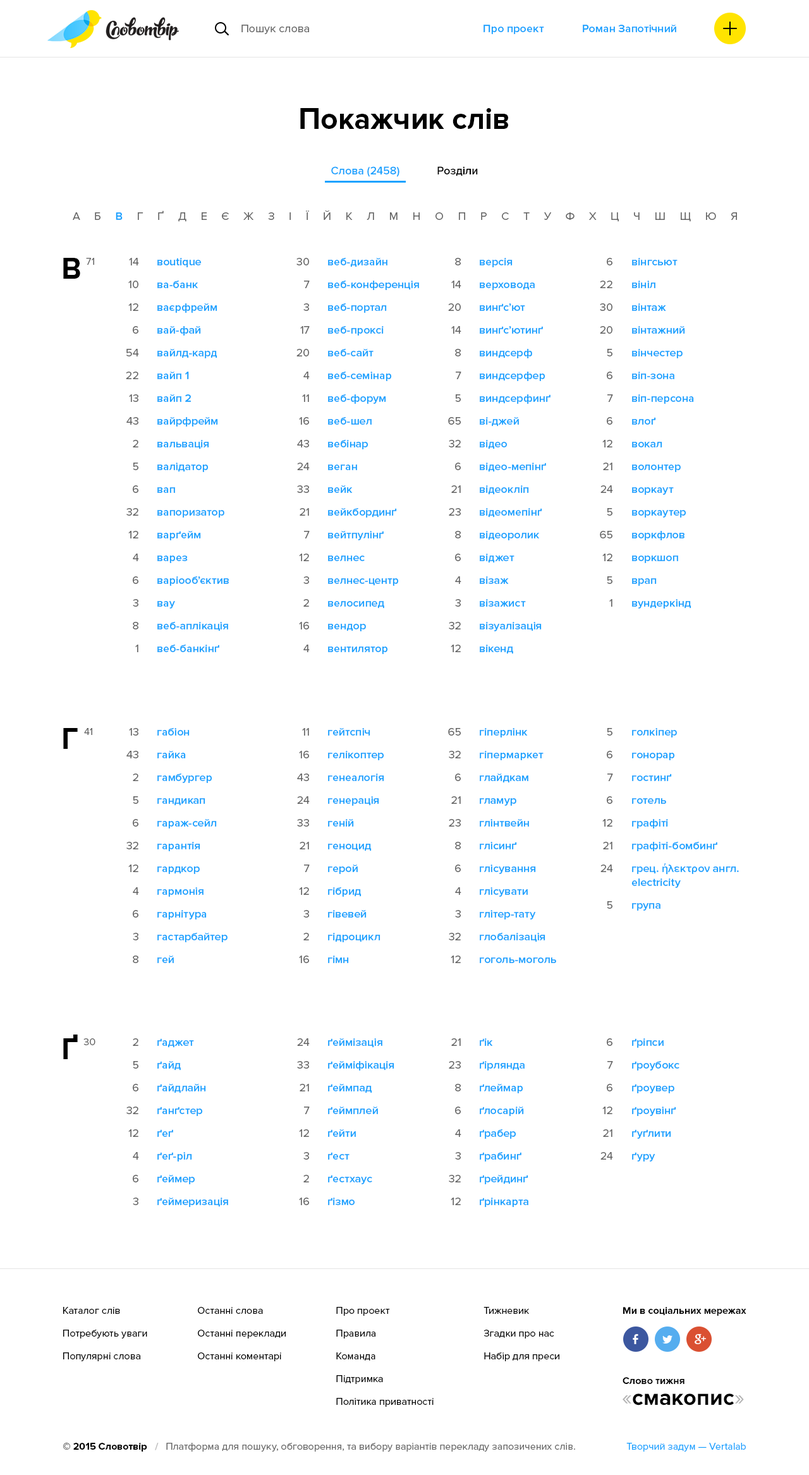
<style>
.page{position:relative;width:809px;height:1475px;background:#ffffff}
.page>*{position:absolute;margin:0}
.t1{font:11.4px "ProximaNova-Regular";color:#666666}
.t2{font:11.4px "ProximaNova-Semibold";color:#17a2ff}
.t3{font:30.3px "ProximaNova-Bold";color:#000000}
.t4{font:11.4px "ProximaNova-Semibold";color:#000000}
.t5{font:11.4px "ProximaNova-Regular";letter-spacing:0.5em;color:#666666}
.t6{font:11.4px "ProximaNova-Semibold";letter-spacing:0.5em;color:#17a2ff}
.t7{font:10.1px "ProximaNova-Regular";color:#666666}
.t8{font:11.4px/22.7px "ProximaNova-Regular";color:#666666}
.t9{font:11.4px/22.7px "ProximaNova-Semibold";color:#17a2ff}
.t10{font:11.4px/13.9px "ProximaNova-Regular";color:#666666}
.t11{font:10.1px/22.7px "ProximaNova-Regular";color:#000000}
.t12{font:10.1px/22.7px "ProximaNova-Regular";color:#010101}
.t13{font:10.1px "ProximaNova-Bold";color:#010101}
.t14{font:22.7px "ProximaNova-Bold";color:#000000}
.t15{font:22.7px "ProximaNova-Regular";color:#b3b3b3}
.t16{font:10.1px "ProximaNova-Bold";color:#000000}
.t17{font:10.1px "ProximaNova-Bold";color:#bfbfbf}
.t18{font:10.1px "ProximaNova-Regular";color:#17a2ff}
</style>
<div class="page">
<p class="t1" style="left:241px;top:25px;width:68px;height:9px">Пошук слова</p>
<p class="t2" style="left:483px;top:25px;width:61px;height:9px">Про проект</p>
<p class="t2" style="left:582px;top:25px;width:94px;height:7px">Роман Запотічний</p>
<p class="t3" style="left:300px;top:108px;width:208px;height:21px">Покажчик слів</p>
<p class="t2" style="left:331px;top:166px;width:68px;height:11px">Слова (2458)</p>
<p class="t4" style="left:437px;top:166px;width:41px;height:10px">Розділи</p>
<p class="t5" style="left:73px;top:210px;width:664px;height:12px">А Б <span class="t6">В</span> Г Ґ Д Е Є Ж З І Ї Й К Л М Н О П Р С Т У Ф Х Ц Ч Ш Щ Ю Я</p>
<p class="t3" style="left:63px;top:258px;width:17px;height:21px">В</p>
<p class="t7" style="left:86px;top:258px;width:8px;height:7px">71</p>
<p class="t8" style="left:126px;top:258px;width:13px;height:394px;text-align:right">14<br>10<br>12<br>6<br>54<br>22<br>13<br>43<br>2<br>5<br>6<br>32<br>12<br>4<br>6<br>3<br>8<br>1</p>
<p class="t9" style="left:157px;top:258px;width:72px;height:394px">вoutique<br>ва-банк<br>ваєрфрейм<br>вай-фай<br>вайлд-кард<br>вайп 1<br>вайп 2<br>вайрфрейм<br>вальвація<br>валідатор<br>вап<br>вапоризатор<br>варґейм<br>варез<br>варіооб’єктив<br>вау<br>веб-аплікація<br>веб-банкінґ</p>
<p class="t8" style="left:296px;top:258px;width:14px;height:394px;text-align:right">30<br>7<br>3<br>17<br>20<br>4<br>11<br>16<br>43<br>24<br>33<br>21<br>7<br>12<br>3<br>2<br>16<br>4</p>
<p class="t9" style="left:328px;top:258px;width:91px;height:396px">веб-дизайн<br>веб-конференція<br>веб-портал<br>веб-проксі<br>веб-сайт<br>веб-семінар<br>веб-форум<br>веб-шел<br>вебінар<br>веган<br>вейк<br>вейкбординґ<br>вейтпулінґ<br>велнес<br>велнес-центр<br>велосипед<br>вендор<br>вентилятор</p>
<p class="t8" style="left:448px;top:258px;width:13px;height:394px;text-align:right">8<br>14<br>20<br>14<br>8<br>7<br>5<br>65<br>32<br>6<br>21<br>23<br>8<br>6<br>4<br>3<br>32<br>12</p>
<p class="t9" style="left:480px;top:258px;width:70px;height:396px">версія<br>верховода<br>винґс’ют<br>винґс’ютинґ<br>виндсерф<br>виндсерфер<br>виндсерфинґ<br>ві-джей<br>відео<br>відео-мепінґ<br>відеокліп<br>відеомепінґ<br>відеоролик<br>віджет<br>візаж<br>візажист<br>візуалізація<br>вікенд</p>
<p class="t8" style="left:600px;top:258px;width:13px;height:349px;text-align:right">6<br>22<br>30<br>20<br>5<br>6<br>7<br>6<br>12<br>21<br>24<br>5<br>65<br>12<br>5<br>1</p>
<p class="t9" style="left:632px;top:258px;width:62px;height:350px">вінгсьют<br>вініл<br>вінтаж<br>вінтажний<br>вінчестер<br>віп-зона<br>віп-персона<br>влоґ<br>вокал<br>волонтер<br>воркаут<br>воркаутер<br>воркфлов<br>воркшоп<br>врап<br>вундеркінд</p>
<p class="t3" style="left:63px;top:728px;width:15px;height:21px">Г</p>
<p class="t7" style="left:84px;top:728px;width:8px;height:7px">41</p>
<p class="t8" style="left:126px;top:728px;width:13px;height:235px;text-align:right">13<br>43<br>2<br>5<br>6<br>32<br>12<br>4<br>6<br>3<br>8</p>
<p class="t9" style="left:157px;top:728px;width:70px;height:235px">габіон<br>гайка<br>гамбургер<br>гандикап<br>гараж-сейл<br>гарантія<br>гардкор<br>гармонія<br>гарнітура<br>гастарбайтер<br>гей</p>
<p class="t8" style="left:297px;top:728px;width:13px;height:235px;text-align:right">11<br>16<br>43<br>24<br>33<br>21<br>7<br>12<br>3<br>2<br>16</p>
<p class="t9" style="left:328px;top:728px;width:56px;height:235px">гейтспіч<br>гелікоптер<br>генеалогія<br>генерація<br>геній<br>геноцид<br>герой<br>гібрид<br>гівевей<br>гідроцикл<br>гімн</p>
<p class="t8" style="left:448px;top:728px;width:13px;height:235px;text-align:right">65<br>32<br>6<br>21<br>23<br>8<br>6<br>4<br>3<br>32<br>12</p>
<p class="t9" style="left:480px;top:728px;width:76px;height:235px">гіперлінк<br>гіпермаркет<br>глайдкам<br>гламур<br>глінтвейн<br>глісинґ<br>глісування<br>глісувати<br>глітер-тату<br>глобалізація<br>гоголь-моголь</p>
<p class="t8" style="left:600px;top:728px;width:13px;height:180px;text-align:right">5<br>6<br>7<br>6<br>12<br>21<br>24<br><br><span class="t10">5</span></p>
<p class="t9" style="left:631px;top:728px;width:108px;height:182px">голкіпер<br>гонорар<br>гостинґ<br>готель<br>графіті<br>графіті-бомбинґ<br>грец. ήλεκτρον англ.<br><span class="t2">electricity<br></span>група</p>
<p class="t3" style="left:63px;top:1034px;width:15px;height:25px">Ґ</p>
<p class="t7" style="left:83px;top:1038px;width:12px;height:7px">30</p>
<p class="t8" style="left:126px;top:1038px;width:13px;height:167px;text-align:right">2<br>5<br>6<br>32<br>12<br>4<br>6<br>3</p>
<p class="t9" style="left:157px;top:1038px;width:71px;height:169px">ґаджет<br>ґайд<br>ґайдлайн<br>ґанґстер<br>ґеґ<br>ґеґ-ріл<br>ґеймер<br>ґеймеризація</p>
<p class="t8" style="left:297px;top:1038px;width:13px;height:167px;text-align:right">24<br>33<br>21<br>7<br>12<br>3<br>2<br>16</p>
<p class="t9" style="left:328px;top:1038px;width:66px;height:167px">ґеймізація<br>ґейміфікація<br>ґеймпад<br>ґеймплей<br>ґейти<br>ґест<br>ґестхаус<br>ґізмо</p>
<p class="t8" style="left:449px;top:1038px;width:12px;height:167px;text-align:right">21<br>23<br>8<br>6<br>4<br>3<br>32<br>12</p>
<p class="t9" style="left:480px;top:1038px;width:48px;height:169px">ґік<br>ґірлянда<br>ґлеймар<br>ґлосарій<br>ґрабер<br>ґрабинґ<br>ґрейдинґ<br>ґрінкарта</p>
<p class="t8" style="left:600px;top:1038px;width:13px;height:121px;text-align:right">6<br>7<br>6<br>12<br>21<br>24</p>
<p class="t9" style="left:632px;top:1038px;width:47px;height:123px">ґріпси<br>ґроубокс<br>ґроувер<br>ґроувінґ<br>ґуґлити<br>ґуру</p>
<p class="t11" style="left:63px;top:1307px;width:84px;height:54px">Каталог слів<br>Потребують уваги<br>Популярні слова</p>
<p class="t11" style="left:198px;top:1307px;width:88px;height:54px">Останні слова<br>Останні переклади<br>Останні коментарі</p>
<p class="t11" style="left:336px;top:1307px;width:97px;height:99px">Про проект<br>Правила<br>Команда<br>Підтримка<br>Політика приватності</p>
<p class="t12" style="left:483px;top:1307px;width:76px;height:54px">Тижневик<br>Згадки про нас<br>Набір для преси</p>
<p class="t13" style="left:623px;top:1307px;width:123px;height:8px">Ми в соціальних мережах</p>
<p class="t13" style="left:622px;top:1377px;width:62px;height:7px">Слово тижня</p>
<p class="t14" style="left:622px;top:1393px;width:122px;height:12px"><span class="t15">«</span>смакопис<span class="t15">»</span></p>
<p class="t7" style="left:63px;top:1442px;width:512px;height:9px"><span class="t16">© 2015 Словотвір   </span><span class="t17">/   </span>Платформа для пошуку, обговорення, та вибору варіантів перекладу запозичених слів.</p>
<p class="t18" style="left:626px;top:1442px;width:119px;height:9px">Творчий задум — Vertalab</p>
</div>
